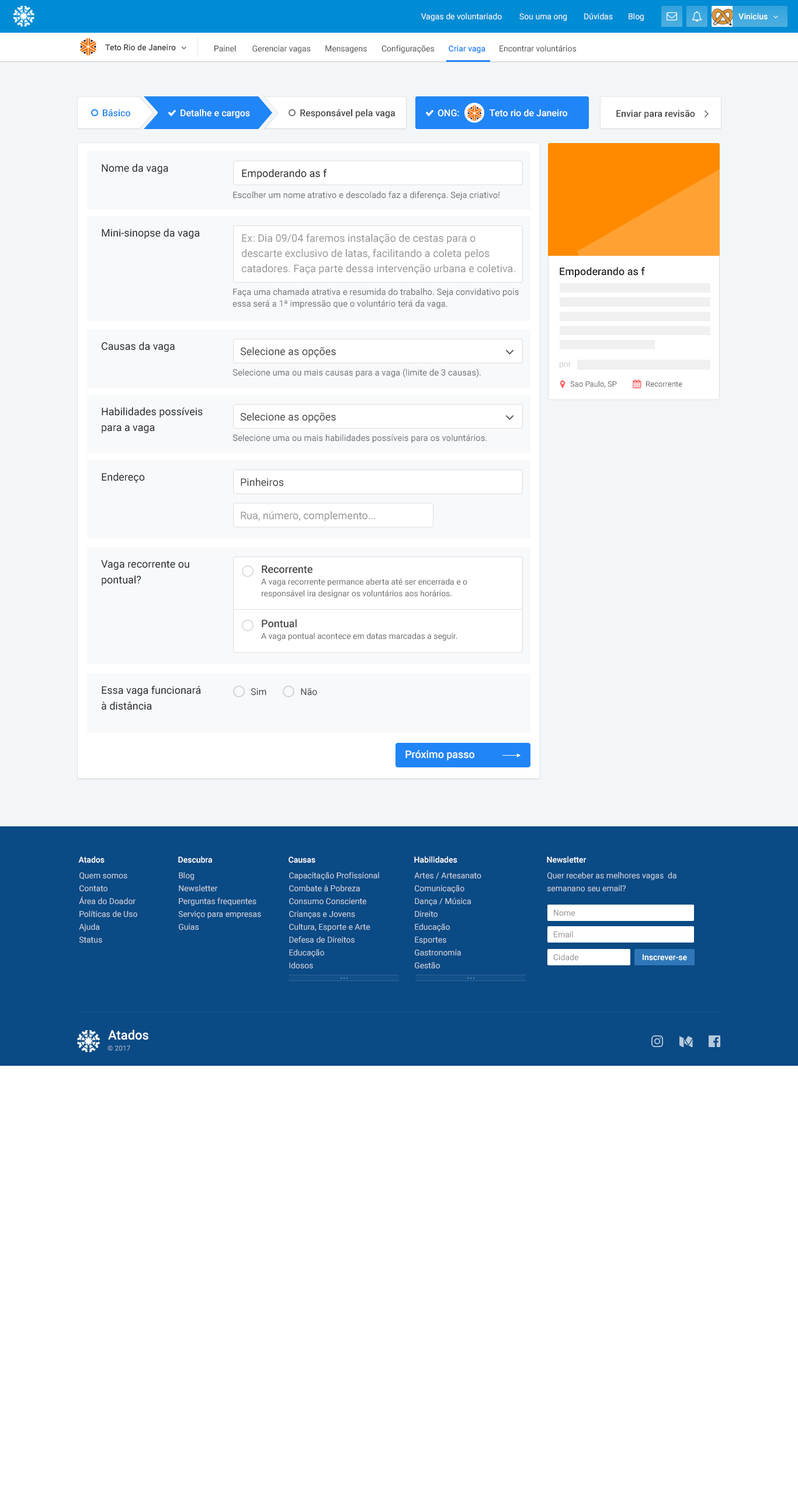
<style>
.page{position:relative;width:798px;height:1495px;background:#ffffff}
.page>*{position:absolute;margin:0}
.t1{font:8.2px "Roboto-Regular";color:#464648}
.t2{font:8.2px "Roboto-Medium";color:#2085f6}
.t3{font:9.3px "Roboto-Medium";color:#2085f6}
.t4{font:9.3px "Roboto-Medium";color:#ffffff}
.t5{font:9.3px "Roboto-Medium";color:#454549}
.t6{font:10.5px "Roboto-Regular";color:#262628}
.t7{font:8.8px "Roboto-Regular";color:#77787a}
.t8{font:10.5px/15.2px "Roboto-Regular";color:#999999}
.t9{font:10.5px "Roboto-Medium";color:#222222}
.t10{font:8.8px/11.7px "Roboto-Regular";color:#77787a}
.t11{font:10.5px "Roboto-Regular";color:#464648}
.t12{font:8.2px "Roboto-Regular";color:#cbccce}
.t13{font:7.6px "Roboto-Regular";color:#666666}
.t14{font:10.5px/15.8px "Roboto-Regular";color:#262628}
.t15{font:10.5px "Roboto-Regular";color:#999999}
.t16{font:8.2px/11.7px "Roboto-Regular";color:#666666}
.t17{font:10.5px/14px "Roboto-Medium";color:#464648}
.t18{font:8.2px/11.1px "Roboto-Regular";color:#666666}
.t19{font:9.3px "Roboto-Regular";color:#464648}
.t20{font:10.5px "Roboto-Medium";color:#ffffff}
</style>
<div class="page">
<p class="t1" style="left:252px;top:45px;width:58px;height:8px">Gerenciar vagas</p>
<p class="t2" style="left:448px;top:45px;width:37px;height:8px">Criar vaga</p>
<p class="t3" style="left:103px;top:109px;width:27px;height:8px">Básico</p>
<p class="t4" style="left:180px;top:109px;width:70px;height:10px">Detalhe e cargos</p>
<p class="t5" style="left:300px;top:109px;width:95px;height:10px">Responsável pela vaga</p>
<p class="t4" style="left:437px;top:109px;width:130px;height:8px">ONG:             Teto rio de Janeiro</p>
<p class="t5" style="left:616px;top:110px;width:79px;height:9px">Enviar para revisão</p>
<p class="t6" style="left:102px;top:164px;width:66px;height:10px">Nome da vaga</p>
<p class="t6" style="left:242px;top:169px;width:85px;height:10px">Empoderando as f</p>
<p class="t7" style="left:233px;top:191px;width:266px;height:9px">Escolher um nome atrativo e descolado faz a diferença. Seja criativo!</p>
<p class="t6" style="left:102px;top:228px;width:98px;height:11px">Mini-sinopse da vaga</p>
<p class="t8" style="left:241px;top:234px;width:274px;height:40px">Ex: Dia 09/04 faremos instalação de cestas para o<br>descarte exclusivo de latas, facilitando a coleta pelos<br>catadores. Faça parte dessa intervenção urbana e coletiva.</p>
<p class="t9" style="left:559px;top:267px;width:86px;height:10px">Empoderando as f</p>
<p class="t10" style="left:232px;top:288px;width:287px;height:20px">Faça uma chamada atrativa e resumida do trabalho. Seja convidativo pois<br>essa será a 1ª impressão que o voluntário terá da vaga.</p>
<p class="t6" style="left:102px;top:342px;width:73px;height:10px">Causas da vaga</p>
<p class="t11" style="left:240px;top:347px;width:96px;height:10px">Selecione as opções</p>
<p class="t12" style="left:559px;top:362px;width:12px;height:6px">por</p>
<p class="t7" style="left:232px;top:368px;width:249px;height:10px">Selecione uma ou mais causas para a vaga (limite de 3 causas).</p>
<p class="t13" style="left:570px;top:381px;width:47px;height:7px">Sao Paulo, SP</p>
<p class="t13" style="left:646px;top:381px;width:36px;height:6px">Recorrente</p>
<p class="t14" style="left:102px;top:407px;width:101px;height:26px">Habilidades possíveis<br>para a vaga</p>
<p class="t11" style="left:240px;top:412px;width:96px;height:11px">Selecione as opções</p>
<p class="t7" style="left:232px;top:434px;width:255px;height:9px">Selecione uma ou mais habilidades possíveis para os voluntários.</p>
<p class="t6" style="left:102px;top:472px;width:43px;height:11px">Endereço</p>
<p class="t11" style="left:241px;top:478px;width:43px;height:8px">Pinheiros</p>
<p class="t15" style="left:241px;top:511px;width:134px;height:10px">Rua, número, complemento...</p>
<p class="t14" style="left:101px;top:560px;width:88px;height:26px">Vaga recorrente ou<br>pontual?</p>
<p class="t16" style="left:261px;top:565px;width:206px;height:33px"><span class="t17">Recorrente<br></span>A vaga recorrente permance aberta até ser encerrada e o<br>responsável ira <span class="t18">designar os voluntários aos horários.</span></p>
<p class="t16" style="left:261px;top:619px;width:196px;height:22px"><span class="t17">Pontual<br></span>A vaga pontual acontece em datas marcadas a seguir.</p>
<p class="t14" style="left:102px;top:686px;width:99px;height:24px">Essa vaga funcionará<br>à distância</p>
<p class="t19" style="left:251px;top:688px;width:15px;height:7px">Sim</p>
<p class="t19" style="left:301px;top:688px;width:16px;height:7px">Não</p>
<p class="t20" style="left:405px;top:750px;width:69px;height:10px">Próximo passo</p>
</div>
